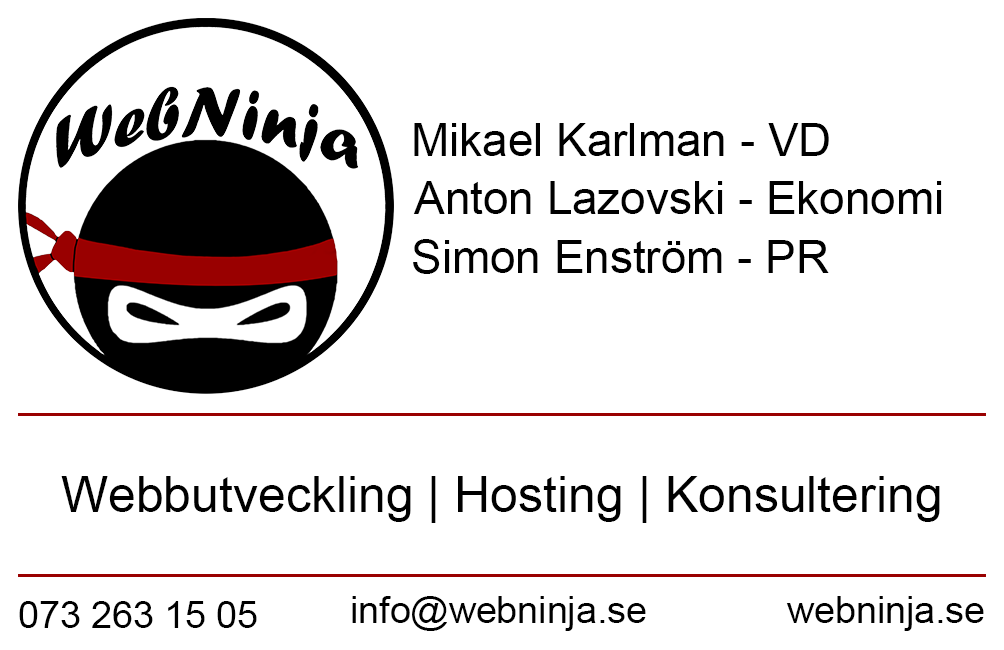
<style>
.page{position:relative;width:1004px;height:650px;background:#ffffff}
.page>*{position:absolute;margin:0}
.t1{font:45.8px "ArialMT";color:#000000}
.t2{font:45.7px "ArialMT";color:#000000}
.t3{font:50px "ArialMT";color:#000000}
.t4{font:37.5px "ArialMT";color:#000000}
</style>
<div class="page">
<p class="t1" style="left:414px;top:123px;width:415px;height:33px">Mikael Karlman - VD</p>
<p class="t1" style="left:413px;top:181px;width:529px;height:33px">Anton Lazovski - Ekonomi</p>
<p class="t2" style="left:413px;top:239px;width:416px;height:35px">Simon Enström - PR</p>
<p class="t3" style="left:61px;top:476px;width:879px;height:47px">Webbutveckling | Hosting | Konsultering</p>
<p class="t4" style="left:19px;top:601px;width:238px;height:27px">073 263 15 05</p>
<p class="t4" style="left:352px;top:596px;width:294px;height:35px">info@webninja.se</p>
<p class="t4" style="left:786px;top:596px;width:198px;height:35px">webninja.se</p>
</div>
